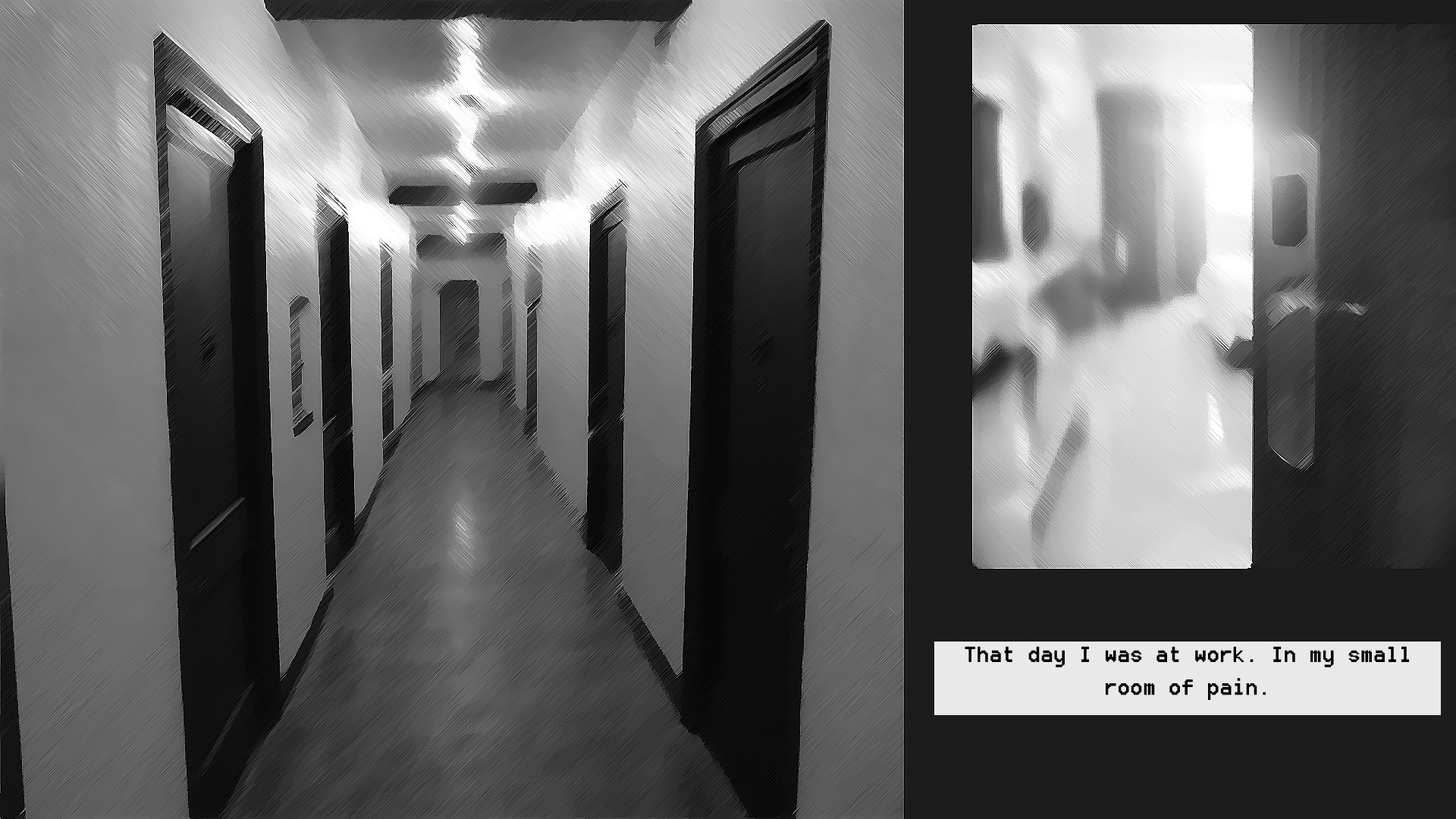
<style>
.page{position:relative;width:1456px;height:819px}
.page>*{position:absolute;margin:0}
.t1{font:27.3px "8514oem";color:#000000}
</style>
<div class="page">
<p class="t1" style="left:965px;top:646px;width:444px;height:54px;text-align:center">That day I was at work. In my small  room of pain.</p>
</div>
